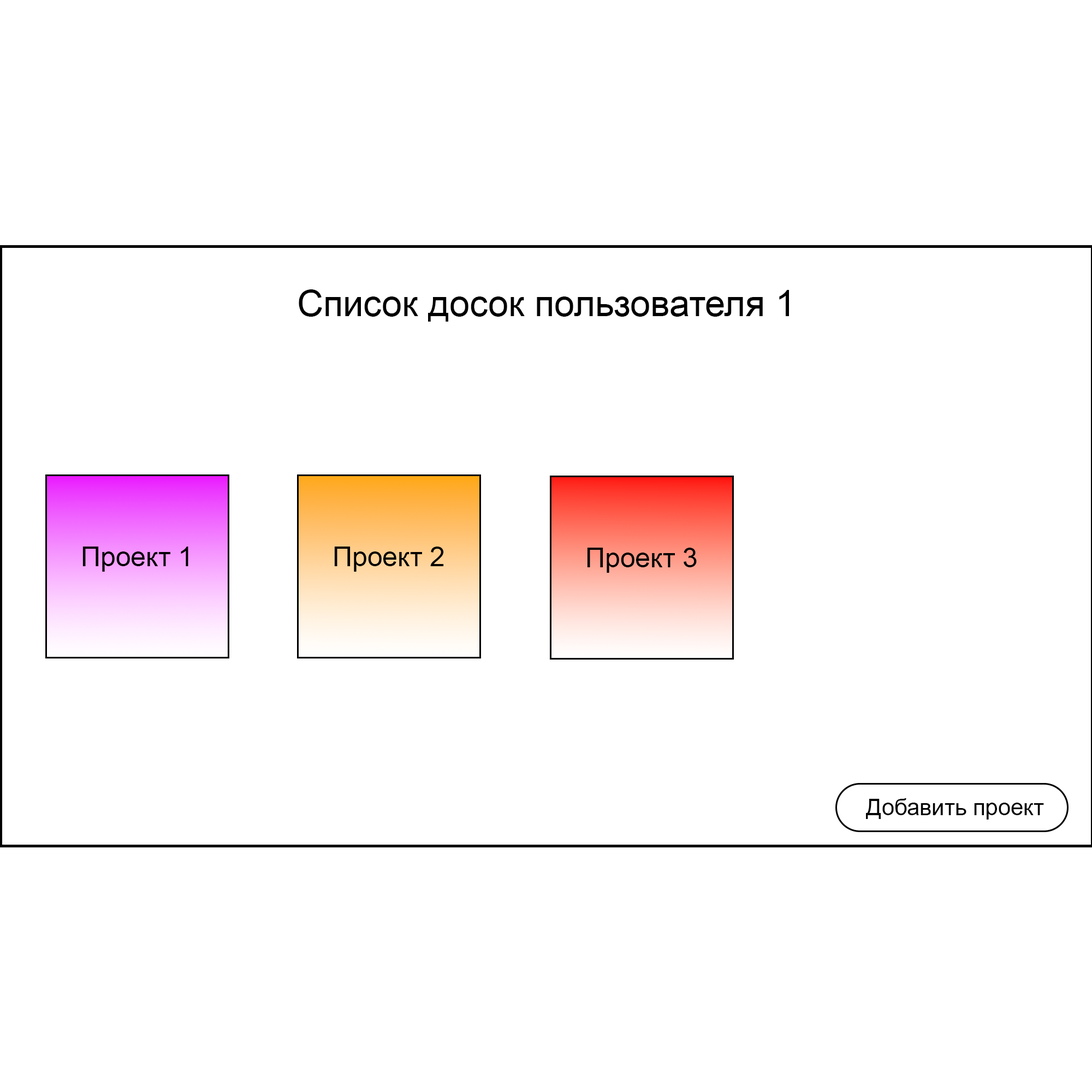
<style>
.page{position:relative;width:1092px;height:1092px;background:#ffffff}
.page>*{position:absolute;margin:0}
.t1{font:36.4px "ArialMT";color:#000000}
.t2{font:27.3px "ArialMT";color:#000000}
.t3{font:22.7px "ArialMT";color:#000000}
</style>
<div class="page">
<p class="t1" style="left:299px;top:289px;width:490px;height:33px">Список досок пользователя 1</p>
<p class="t2" style="left:82px;top:547px;width:106px;height:25px">Проект 1</p>
<p class="t2" style="left:334px;top:547px;width:110px;height:25px">Проект 2</p>
<p class="t2" style="left:587px;top:548px;width:110px;height:25px">Проект 3</p>
<p class="t3" style="left:866px;top:798px;width:178px;height:22px">Добавить проект</p>
</div>
